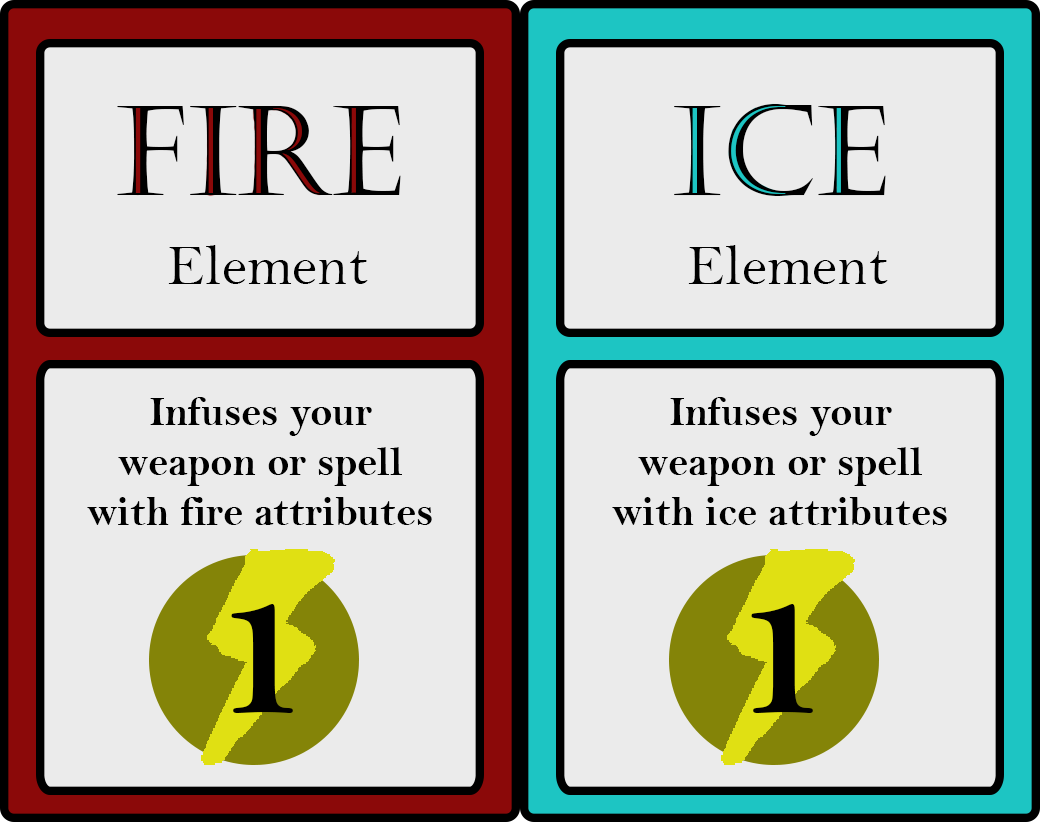
<style>
.page{position:relative;width:1040px;height:822px;background:#ebebeb}
.page>*{position:absolute;margin:0}
.t1{font:125px "Castellar";color:#000000}
.t2{font:58.3px "BellMT";color:#000000}
.t3{font:41.7px "BellMTBold";color:#000000}
.t4{font:200px "BellMTBold";color:#000000}
</style>
<div class="page">
<p class="t1" style="left:117px;top:106px;width:284px;height:89px">Fire</p>
<p class="t1" style="left:674px;top:104px;width:212px;height:92px">ICE</p>
<p class="t2" style="left:168px;top:245px;width:200px;height:39px">Element</p>
<p class="t2" style="left:688px;top:245px;width:200px;height:39px">Element</p>
<p class="t3" style="left:87px;top:397px;width:345px;height:128px;text-align:center">Infuses your weapon or spell with fire attributes</p>
<p class="t3" style="left:612px;top:397px;width:335px;height:128px;text-align:center">Infuses your weapon or spell with ice attributes</p>
<p class="t4" style="left:231px;top:604px;width:62px;height:109px">1</p>
<p class="t4" style="left:751px;top:604px;width:62px;height:109px">1</p>
</div>
